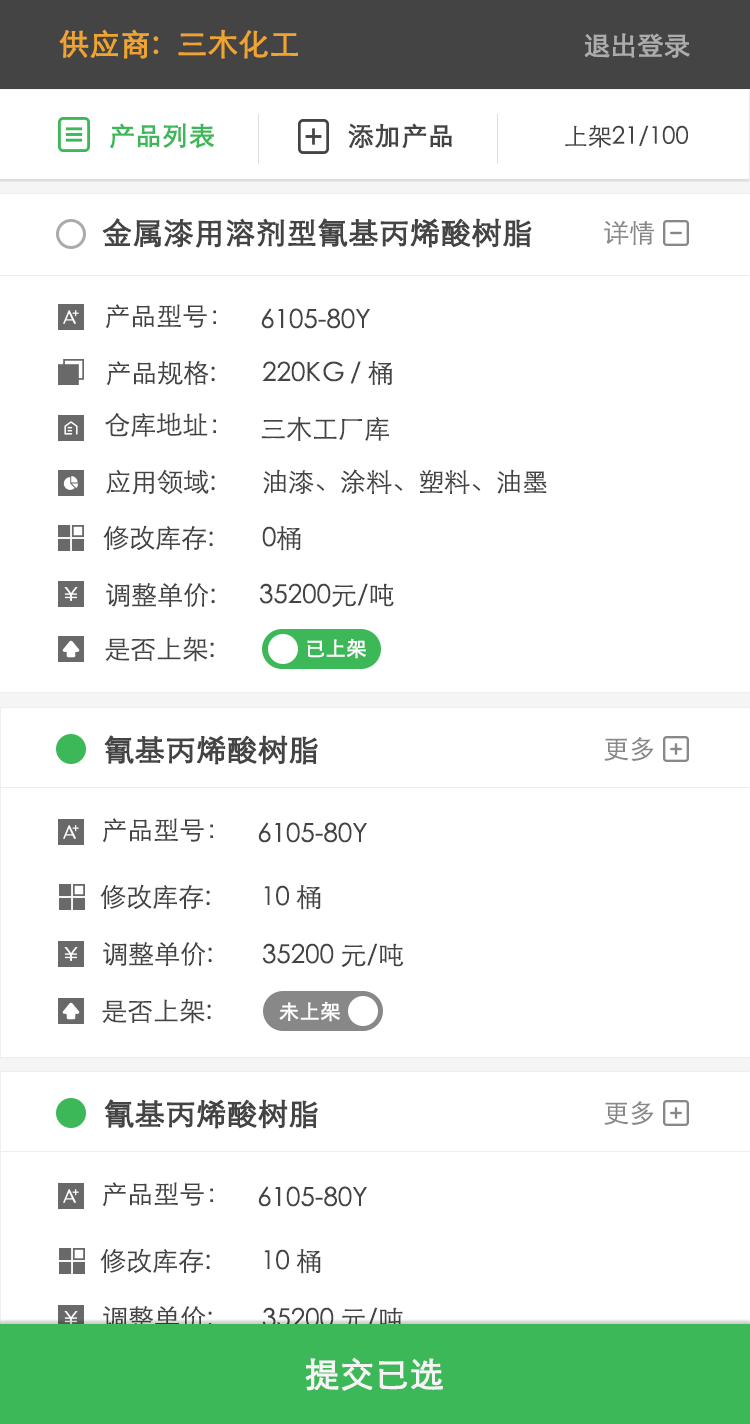
<style>
.page{position:relative;width:750px;height:1424px;background:#ffffff}
.page>*{position:absolute;margin:0}
.t1{font:30px "STXihei";color:#efa431;font-weight:bold}
.t2{font:26px "STXihei";color:#acacac;font-weight:bold}
.t3{font:26px "STXihei";color:#3db858;font-weight:bold}
.t4{font:26px "STXihei";color:#444444;font-weight:bold}
.t5{font:24px "STXihei";color:#444444}
.t6{font:30px "STXihei";color:#444444;font-weight:bold}
.t7{font:26px "STXihei";color:#888888}
.t8{font:26px "STXihei";color:#444444}
.t9{font:20px "STXihei";color:#ffffff;font-weight:bold}
.t10{font:34px "STXihei";color:#f5f5f5;font-weight:bold}
</style>
<div class="page">
<p class="t1" style="left:59px;top:29px;width:239px;height:30px">供应商:  三木化工</p>
<p class="t2" style="left:584px;top:33px;width:106px;height:25px">退出登录</p>
<p class="t3" style="left:110px;top:123px;width:104px;height:25px">产品列表</p>
<p class="t4" style="left:348px;top:123px;width:104px;height:25px">添加产品</p>
<p class="t5" style="left:565px;top:125px;width:123px;height:23px">上架21/100</p>
<p class="t6" style="left:102px;top:218px;width:430px;height:30px">金属漆用溶剂型氰基丙烯酸树脂</p>
<p class="t7" style="left:604px;top:220px;width:50px;height:25px">详情</p>
<p class="t8" style="left:105px;top:304px;width:111px;height:24px">产品型号：</p>
<p class="t8" style="left:261px;top:308px;width:109px;height:21px">6105-80Y</p>
<p class="t8" style="left:106px;top:361px;width:109px;height:24px">产品规格:</p>
<p class="t8" style="left:262px;top:361px;width:130px;height:24px">220KG / 桶</p>
<p class="t8" style="left:105px;top:412px;width:111px;height:25px">仓库地址：</p>
<p class="t8" style="left:261px;top:416px;width:128px;height:25px">三木工厂库</p>
<p class="t8" style="left:106px;top:469px;width:109px;height:26px">应用领域:</p>
<p class="t8" style="left:263px;top:469px;width:284px;height:25px">油漆、涂料、塑料、油墨</p>
<p class="t8" style="left:103px;top:525px;width:110px;height:26px">修改库存:</p>
<p class="t8" style="left:262px;top:526px;width:39px;height:25px">0桶</p>
<p class="t8" style="left:106px;top:583px;width:109px;height:24px">调整单价:</p>
<p class="t8" style="left:259px;top:583px;width:135px;height:24px">35200元/吨</p>
<p class="t8" style="left:105px;top:636px;width:109px;height:26px">是否上架:</p>
<p class="t9" style="left:307px;top:638px;width:59px;height:21px">已上架</p>
<p class="t6" style="left:104px;top:735px;width:214px;height:30px">氰基丙烯酸树脂</p>
<p class="t7" style="left:604px;top:737px;width:50px;height:24px">更多</p>
<p class="t8" style="left:102px;top:818px;width:111px;height:24px">产品型号：</p>
<p class="t8" style="left:258px;top:822px;width:109px;height:21px">6105-80Y</p>
<p class="t8" style="left:100px;top:884px;width:110px;height:26px">修改库存:</p>
<p class="t8" style="left:264px;top:885px;width:57px;height:25px">10 桶</p>
<p class="t8" style="left:103px;top:942px;width:109px;height:24px">调整单价:</p>
<p class="t8" style="left:262px;top:943px;width:142px;height:24px">35200 元/吨</p>
<p class="t8" style="left:102px;top:998px;width:109px;height:26px">是否上架:</p>
<p class="t9" style="left:279px;top:1001px;width:61px;height:21px">未上架</p>
<p class="t6" style="left:104px;top:1099px;width:214px;height:30px">氰基丙烯酸树脂</p>
<p class="t7" style="left:604px;top:1101px;width:50px;height:24px">更多</p>
<p class="t8" style="left:102px;top:1182px;width:111px;height:24px">产品型号：</p>
<p class="t8" style="left:258px;top:1186px;width:109px;height:21px">6105-80Y</p>
<p class="t8" style="left:100px;top:1248px;width:110px;height:26px">修改库存:</p>
<p class="t8" style="left:264px;top:1249px;width:57px;height:25px">10 桶</p>
<p class="t8" style="left:103px;top:1306px;width:109px;height:24px">调整单价:</p>
<p class="t8" style="left:262px;top:1307px;width:142px;height:24px">35200 元/吨</p>
<p class="t10" style="left:305px;top:1357px;width:138px;height:34px">提交已选</p>
</div>
